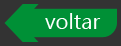
<style>
.page{position:relative;width:121px;height:46px;background:#009036}
.page>*{position:absolute;margin:0}
.t1{font:22px "Ebrima";color:#ffffff}
</style>
<div class="page">
<p class="t1" style="left:45px;top:13px;width:56px;height:16px">voltar</p>
</div>
